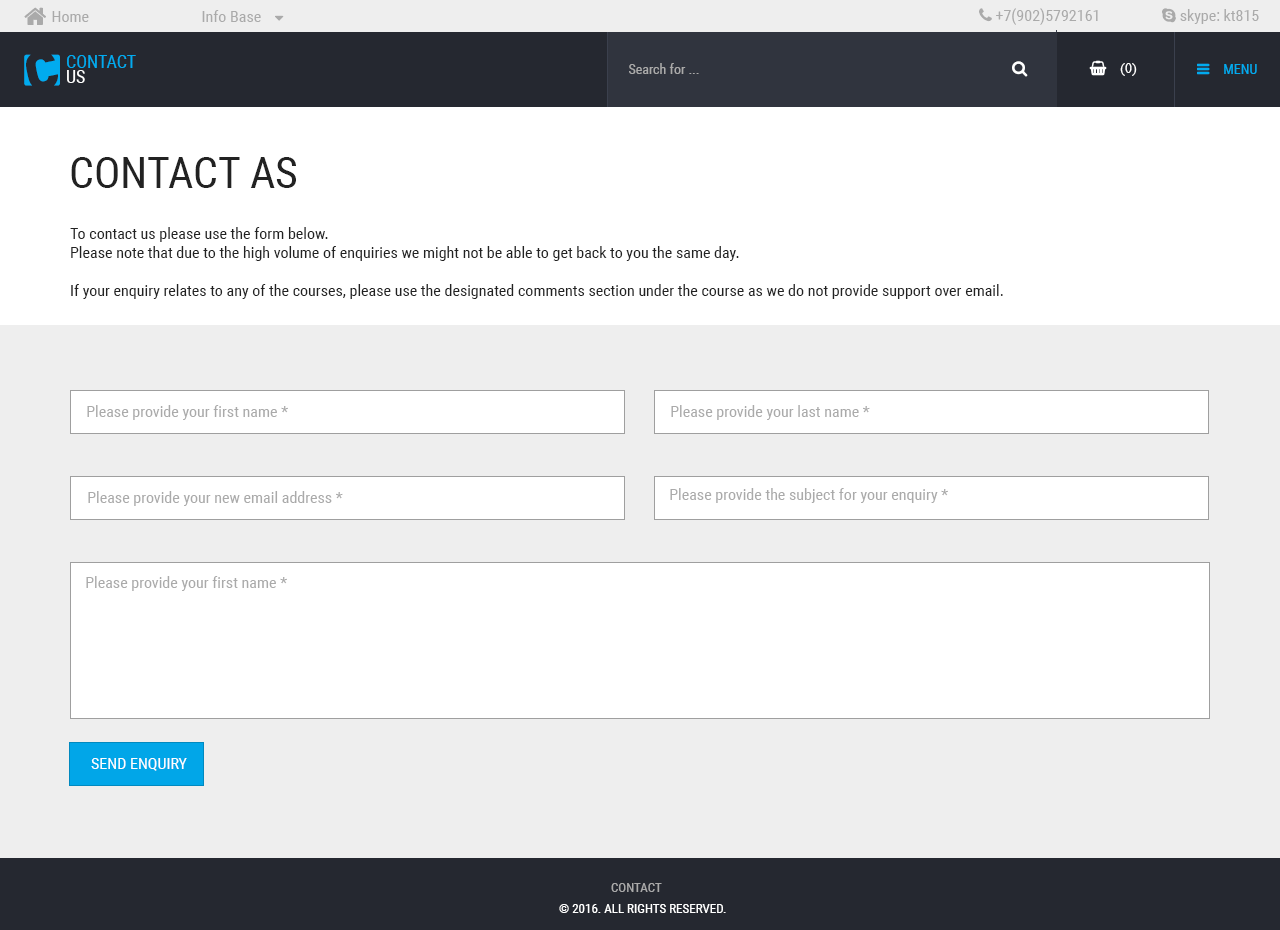
<style>
.page{position:relative;width:1280px;height:930px;background:#ffffff}
.page>*{position:absolute;margin:0}
.t1{font:16px "RobotoCondensed-Regular";color:#aaaaaa}
.t2{font:18px/15px "RobotoCondensed-Regular";color:#01abef}
.t3{font:18px/15px "RobotoCondensed-Regular";color:#ffffff}
.t4{font:14px "RobotoCondensed-Regular";color:#aaaaaa}
.t5{font:44px "RobotoCondensed-Regular";color:#222222}
.t6{font:16px "RobotoCondensed-Regular";color:#222222}
.t7{font:16px "RobotoCondensed-Regular";color:#ffffff}
.t8{font:13px "RobotoCondensed-Regular";color:#aaaaaa}
.t9{font:13px "RobotoCondensed-Regular";color:#ffffff}
</style>
<div class="page">
<p class="t1" style="left:52px;top:11px;width:37px;height:11px">Home</p>
<p class="t1" style="left:202px;top:10px;width:59px;height:12px">Info Base</p>
<p class="t2" style="left:67px;top:55px;width:69px;height:28px;text-align:right">CONTACT<br><span class="t3">US</span></p>
<p class="t4" style="left:629px;top:63px;width:70px;height:11px">Search for ...</p>
<p class="t5" style="left:71px;top:157px;width:225px;height:31px">CONTACT AS</p>
<p class="t6" style="left:70px;top:227px;width:933px;height:72px;text-align:right">To contact us please use the form below.<br>Please note that due to the high volume of enquiries we might not be able to get back to you the same day.<br><br>If your enquiry relates to any of the courses, please use the designated comments section under the course as we do not provide support over email.</p>
<p class="t1" style="left:87px;top:405px;width:201px;height:15px">Please provide your first name *</p>
<p class="t1" style="left:671px;top:405px;width:199px;height:15px">Please provide your last name *</p>
<p class="t1" style="left:88px;top:491px;width:255px;height:15px">Please provide your new email address *</p>
<p class="t1" style="left:670px;top:488px;width:278px;height:15px">Please provide the subject for your enquiry *</p>
<p class="t1" style="left:86px;top:576px;width:201px;height:15px">Please provide your first name *</p>
<p class="t7" style="left:91px;top:758px;width:96px;height:13px">SEND ENQUIRY</p>
<p class="t8" style="left:611px;top:883px;width:51px;height:9px">CONTACT</p>
<p class="t9" style="left:559px;top:904px;width:167px;height:9px">© 2016. ALL RIGHTS RESERVED.</p>
</div>
